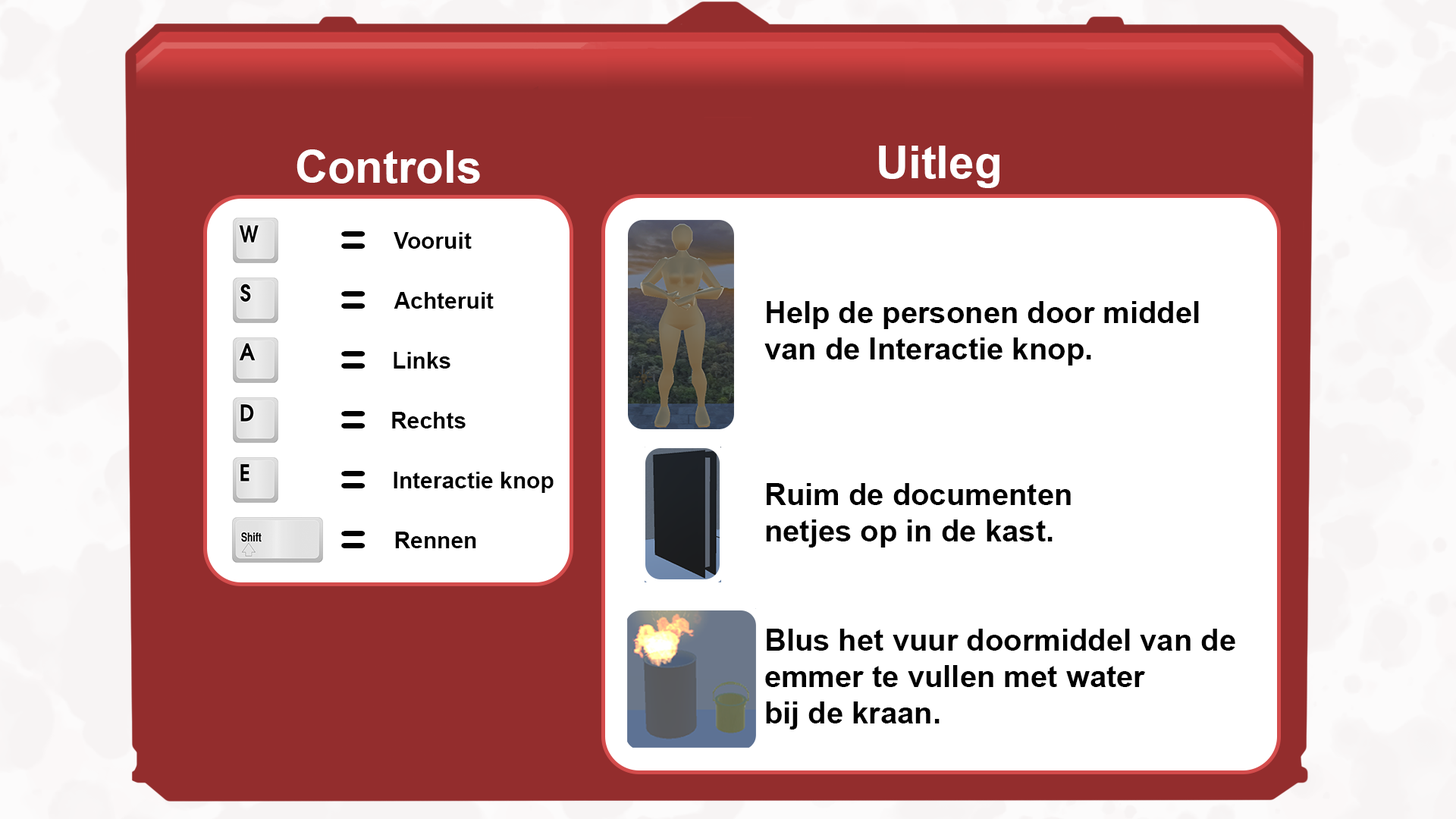
<style>
.page{position:relative;width:1456px;height:819px;background:#ffffff}
.page>*{position:absolute;margin:0}
.t1{font:45.5px "Arial-BoldMT";color:#ffffff}
.t2{font:56.9px "ComicSansMS-Bold";color:#010101}
.t3{font:22.7px "Arial-BoldMT";color:#000000}
.t4{font:30.3px "Arial-BoldMT";color:#000000}
</style>
<div class="page">
<p class="t1" style="left:297px;top:149px;width:183px;height:35px">Controls</p>
<p class="t1" style="left:879px;top:146px;width:120px;height:42px">Uitleg</p>
<p class="t2" style="left:341px;top:231px;width:25px;height:18px">=</p>
<p class="t3" style="left:394px;top:232px;width:78px;height:17px">Vooruit</p>
<p class="t2" style="left:341px;top:291px;width:25px;height:18px">=</p>
<p class="t3" style="left:394px;top:292px;width:100px;height:17px">Achteruit</p>
<p class="t4" style="left:764px;top:301px;width:471px;height:429px">Help de personen door middel <br>van de Interactie knop.<br><br><br><br>Ruim de documenten<br>netjes op in de kast.<br><br><br>Blus het vuur doormiddel van de<br>emmer te vullen met water<br>bij de kraan.</p>
<p class="t2" style="left:341px;top:351px;width:25px;height:18px">=</p>
<p class="t3" style="left:394px;top:352px;width:56px;height:17px">Links</p>
<p class="t2" style="left:341px;top:411px;width:25px;height:17px">=</p>
<p class="t3" style="left:392px;top:412px;width:74px;height:16px">Rechts</p>
<p class="t2" style="left:341px;top:471px;width:25px;height:17px">=</p>
<p class="t3" style="left:394px;top:472px;width:160px;height:21px">Interactie knop</p>
<p class="t2" style="left:341px;top:531px;width:25px;height:17px">=</p>
<p class="t3" style="left:395px;top:532px;width:81px;height:16px">Rennen</p>
</div>
